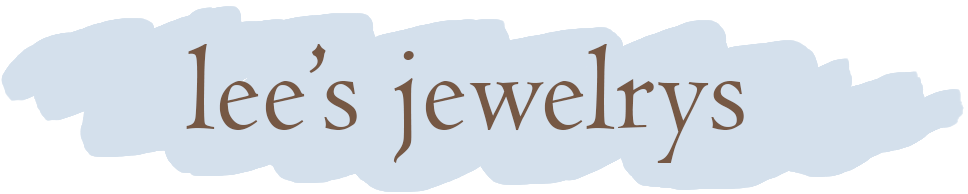
<style>
.page{position:relative;width:968px;height:194px;background:#d4e0ec}
.page>*{position:absolute;margin:0}
.t1{font:125px "Centaur";color:#765844}
</style>
<div class="page">
<p class="t1" style="left:186px;top:44px;width:558px;height:119px">lee’s jewelrys</p>
</div>
